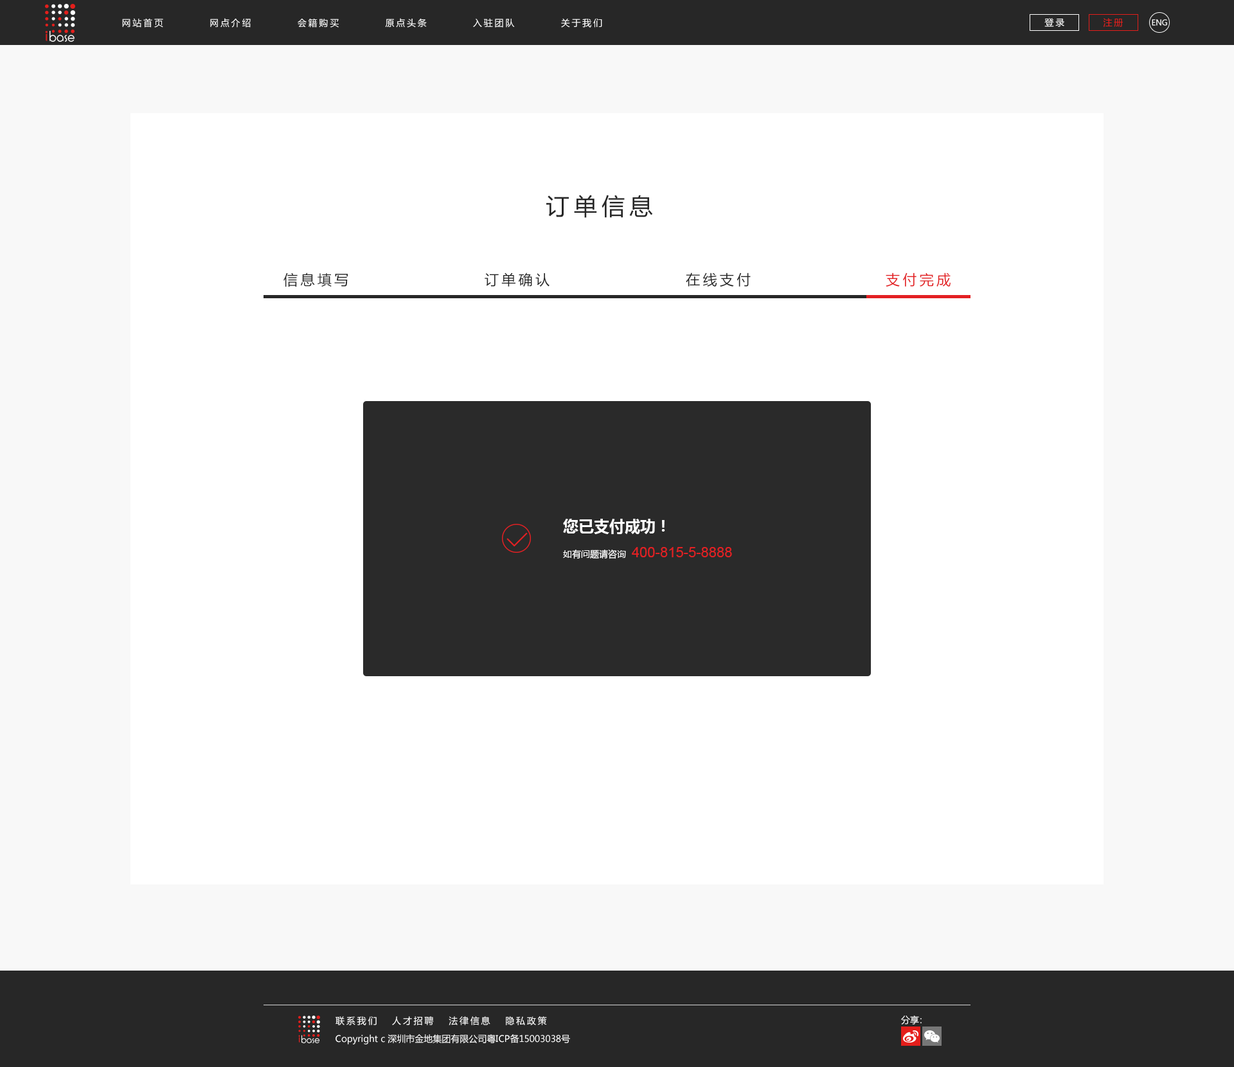
<style>
.page{position:relative;width:1234px;height:1067px;background:#ffffff}
.page>*{position:absolute;margin:0}
.t1{font:9px "MicrosoftYaHei";letter-spacing:0.2em;color:#ffffff}
.t2{font:9px "MicrosoftYaHei";letter-spacing:0.2em;color:#e41e1b}
.t3{font:7.7px "MicrosoftYaHei";letter-spacing:-0.01em;color:#ffffff}
.t4{font:23.1px "MicrosoftYaHei";letter-spacing:0.2em;color:#272727;text-transform:uppercase}
.t5{font:14.1px "MicrosoftYaHei";letter-spacing:0.2em;color:#272727;text-transform:uppercase}
.t6{font:14.1px "MicrosoftYaHei";letter-spacing:0.2em;color:#e32023;text-transform:uppercase}
.t7{font:14.1px "ArialMT";color:#e32023;text-transform:uppercase}
.t8{font:15.4px "MicrosoftYaHei-Bold";color:#ffffff}
.t9{font:9px "MicrosoftYaHei";color:#ffffff;text-transform:uppercase}
.t10{font:9px "MicrosoftYaHei";letter-spacing:-0.3em;color:#ffffff}
.t11{font:9px "MicrosoftYaHei";color:#ffffff}
</style>
<div class="page">
<p class="t1" style="left:122px;top:18px;width:480px;height:10px">网站首页          网点介绍          会籍购买          原点头条          入驻团队          关于我们</p>
<p class="t1" style="left:1045px;top:18px;width:20px;height:9px">登录</p>
<p class="t2" style="left:1103px;top:18px;width:20px;height:9px">注册</p>
<p class="t3" style="left:1152px;top:19px;width:15px;height:7px">ENG</p>
<p class="t4" style="left:546px;top:195px;width:107px;height:23px">订单信息</p>
<p class="t5" style="left:284px;top:273px;width:64px;height:14px">信息填写</p>
<p class="t5" style="left:485px;top:273px;width:65px;height:14px">订单确认</p>
<p class="t5" style="left:686px;top:273px;width:65px;height:14px">在线支付</p>
<p class="t6" style="left:886px;top:273px;width:65px;height:14px">支付完成</p>
<p class="t7" style="left:563px;top:519px;width:169px;height:40px"><span class="t8">您已支付成功！<br></span><span class="t9">如有问题请咨询  </span>400-815-5-8888</p>
<p class="t1" style="left:336px;top:1016px;width:211px;height:9px">联系我们   人才招聘   法律信息   隐私政策</p>
<p class="t10" style="left:901px;top:1016px;width:21px;height:9px"><span class="t11">分</span>享：</p>
<p class="t11" style="left:336px;top:1034px;width:234px;height:11px">Copyright c 深圳市金地集团有限公司粤ICP备15003038号</p>
</div>
